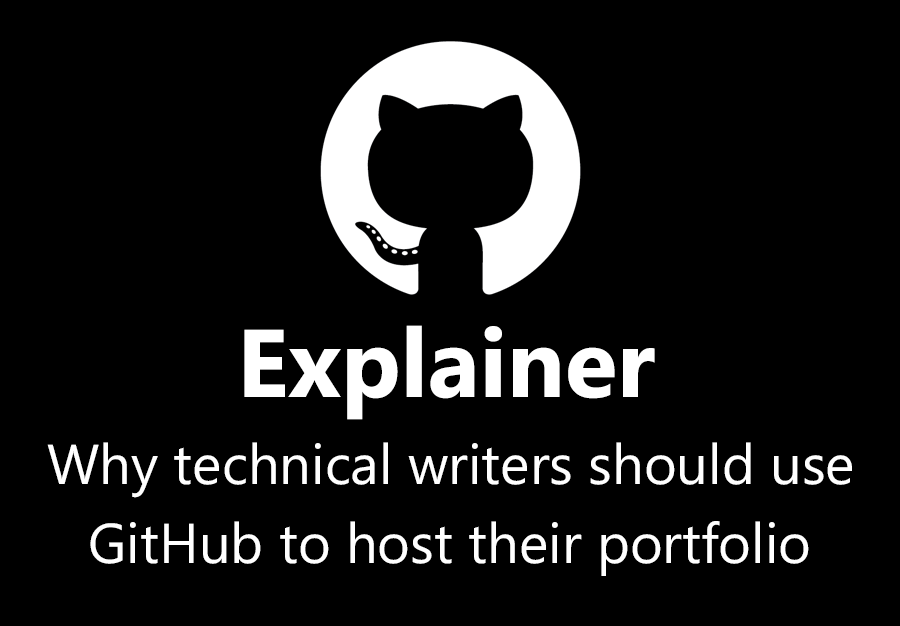
<style>
.page{position:relative;width:900px;height:626px;background:#000000}
.page>*{position:absolute;margin:0}
.t1{font:96px "MicrosoftPhagsPa-Bold";color:#ffffff}
.t2{font:56px "MicrosoftPhagsPa";color:#ffffff}
</style>
<div class="page">
<p class="t1" style="left:244px;top:325px;width:411px;height:95px">Explainer</p>
<p class="t2" style="left:47px;top:442px;width:805px;height:56px">Why technical writers should use</p>
<p class="t2" style="left:90px;top:521px;width:719px;height:55px">GitHub to host their portfolio</p>
</div>
